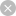
<style>
.page{position:relative;width:16px;height:16px;background:#bbbbbb}
.page>*{position:absolute;margin:0}
.t1{font:16px "Lato-Light";color:#ffffff}
</style>
<div class="page">
<p class="t1" style="left:4px;top:4px;width:8px;height:8px">×</p>
</div>
